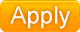
<style>
.page{position:relative;width:80px;height:32px}
.page>*{position:absolute;margin:0}
.t1{font:24px "ArialMT";color:#ffffff}
</style>
<div class="page">
<p class="t1" style="left:10px;top:3px;width:61px;height:28px">Apply</p>
</div>
